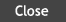
<style>
.page{position:relative;width:66px;height:22px;background:#444444}
.page>*{position:absolute;margin:0}
.t1{font:14px "TrebuchetMS";color:#fbfbfb}
</style>
<div class="page">
<p class="t1" style="left:15px;top:5px;width:34px;height:11px">Close</p>
</div>
